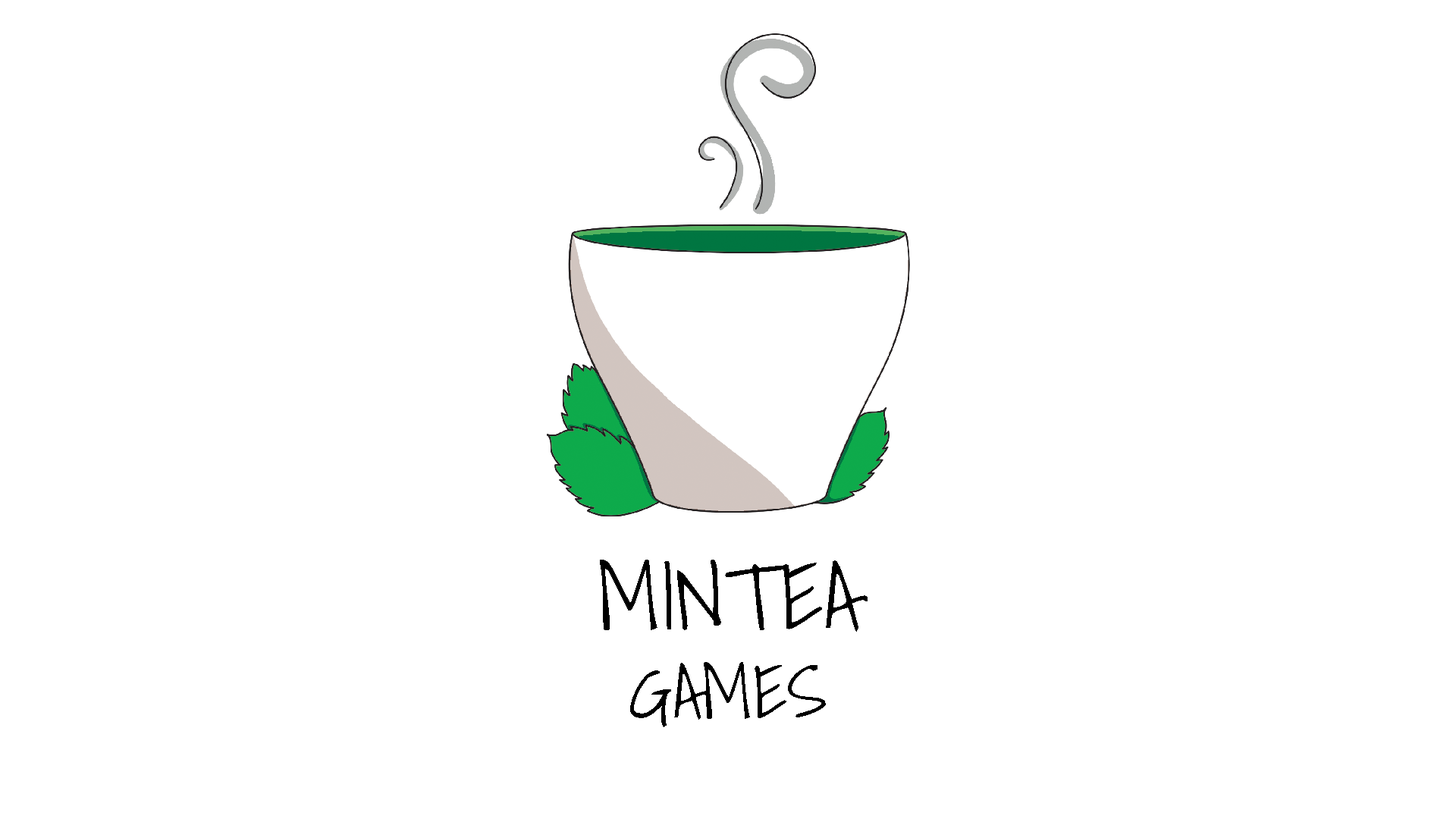
<style>
.page{position:relative;width:1456px;height:819px;background:#ffffff}
.page>*{position:absolute;margin:0}
.t1{font:92.6px "ShadowsIntoLight";color:#000000;text-transform:uppercase}
.t2{font:74.1px "ShadowsIntoLight";color:#000000;text-transform:uppercase}
</style>
<div class="page">
<p class="t1" style="left:600px;top:560px;width:268px;height:167px;text-align:center">mintea <br><span class="t2">games</span></p>
</div>
